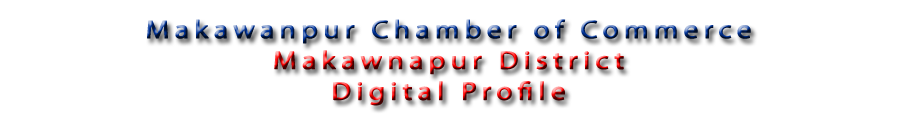
<style>
.page{position:relative;width:900px;height:130px;background:#ffffff}
.page>*{position:absolute;margin:0}
.t1{font:25.4px/30.8px "MyriadPro-Regular";letter-spacing:0.16em;font-weight:bold;scale:1.15 1}
</style>
<div class="page">
<p class="t1" style="left:147px;top:19px;width:604px;height:87px;text-align:center">Makawanpur Chamber of Commerce<br>Makawnapur District<br>Digital Profile</p>
</div>
